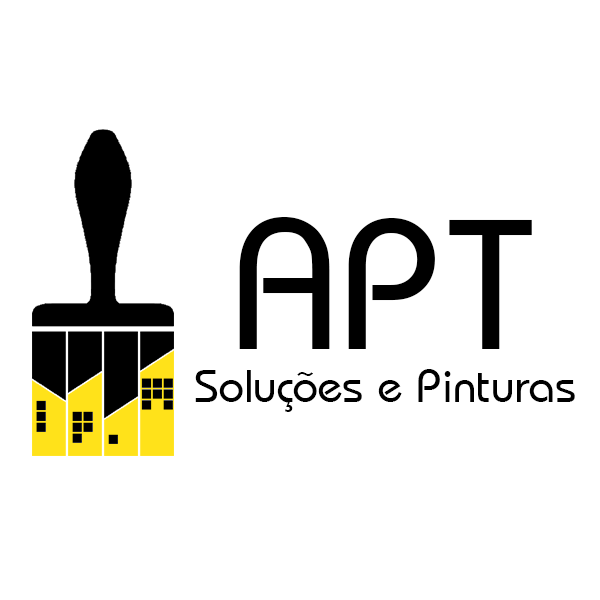
<style>
.page{position:relative;width:600px;height:600px;background:#ffffff}
.page>*{position:absolute;margin:0}
.t1{font:193px "Bauhaus-Regular";color:#000000}
.t2{font:48px "Bauhaus-Regular";color:#000000}
</style>
<div class="page">
<p class="t1" style="left:239px;top:216px;width:293px;height:133px">APT</p>
<p class="t2" style="left:195px;top:369px;width:380px;height:43px">Soluções e Pinturas</p>
</div>
